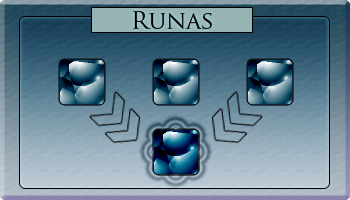
<style>
.page{position:relative;width:350px;height:200px}
.page>*{position:absolute;margin:0}
.t1{font:24px "TrajanPro-Regular";color:#000000}
</style>
<div class="page">
<p class="t1" style="left:133px;top:11px;width:79px;height:18px">Runas</p>
</div>
